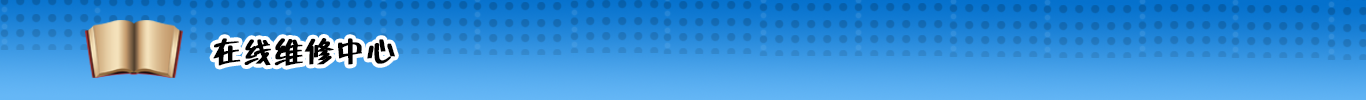
<style>
.page{position:relative;width:1366px;height:100px}
.page>*{position:absolute;margin:0}
.t1{font:30px "Ftiebihei";color:#000000;font-weight:bold}
</style>
<div class="page">
<p class="t1" style="left:213px;top:38px;width:182px;height:28px">在线维修中心</p>
</div>
